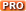
<style>
.page{position:relative;width:26px;height:11px}
.page>*{position:absolute;margin:0}
.t1{font:8.6px "ArialRoundedMTBold";letter-spacing:0.1em;color:#ffffff}
</style>
<div class="page">
<p class="t1" style="left:3px;top:2px;width:21px;height:7px">PRO</p>
</div>
